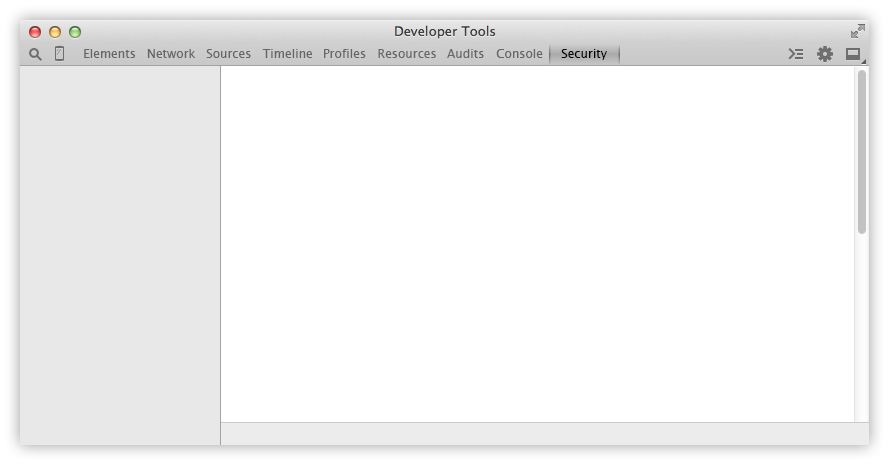
<style>
.page{position:relative;width:889px;height:465px;background:#ffffff}
.page>*{position:absolute;margin:0}
.t1{font:12px "LucidaGrande";color:#666666}
.t2{font:12px "LucidaGrande";color:#000000}
</style>
<div class="page">
<p class="t1" style="left:84px;top:49px;width:52px;height:9px">Elements</p>
<p class="t1" style="left:147px;top:49px;width:49px;height:9px">Network</p>
<p class="t1" style="left:206px;top:49px;width:45px;height:9px">Sources</p>
<p class="t1" style="left:262px;top:49px;width:50px;height:9px">Timeline</p>
<p class="t1" style="left:324px;top:49px;width:42px;height:9px">Profiles</p>
<p class="t1" style="left:378px;top:49px;width:58px;height:9px">Resources</p>
<p class="t1" style="left:447px;top:49px;width:37px;height:9px">Audits</p>
<p class="t1" style="left:496px;top:49px;width:47px;height:9px">Console</p>
<p class="t2" style="left:561px;top:49px;width:46px;height:11px">Security</p>
</div>
